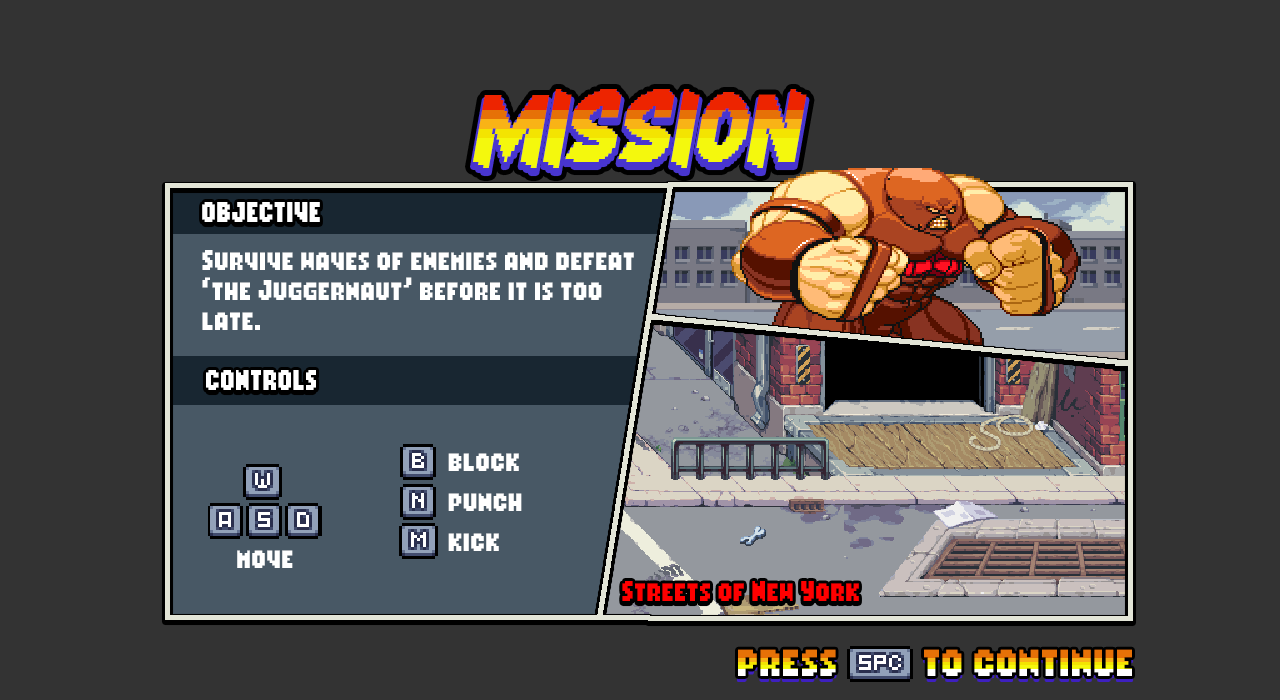
<style>
.page{position:relative;width:1280px;height:700px;background:#333333}
.page>*{position:absolute;margin:0}
.t1{font:20px "NutshellNews";color:#ffffff}
.t2{font:20px/30px "NutshellNews";color:#ffffff}
.t3{font:20px/40px "NutshellNews";color:#ffffff}
.t4{font:20px "NutshellNews";color:#ff0000}
.t5{font:30px "NutshellNews"}
</style>
<div class="page">
<p class="t1" style="left:202px;top:202px;width:118px;height:20px">OBJECTIVE</p>
<p class="t2" style="left:202px;top:250px;width:432px;height:80px">Survive waves of enemies and defeat <br>‘the Juggernaut’ before it is too<br>late.</p>
<p class="t1" style="left:206px;top:370px;width:110px;height:20px">CONTROLS</p>
<p class="t3" style="left:448px;top:453px;width:74px;height:98px">block<br>punch<br>kick</p>
<p class="t1" style="left:237px;top:550px;width:56px;height:18px">move</p>
<p class="t4" style="left:622px;top:581px;width:237px;height:20px">Streets of New York</p>
<p class="t5" style="left:738px;top:649px;width:394px;height:27px">press         to continue</p>
</div>
